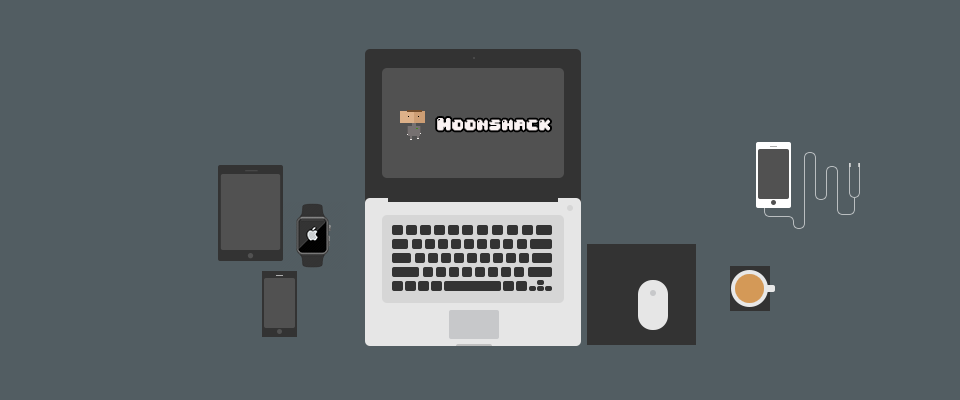
<style>
.page{position:relative;width:960px;height:400px;background:#525d62}
.page>*{position:absolute;margin:0}
.t1{font:14.8px "04b30";color:#faf2f2}
</style>
<div class="page">
<p class="t1" style="left:437px;top:118px;width:113px;height:13px">Moonshack</p>
</div>
